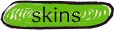
<style>
.page{position:relative;width:114px;height:30px}
.page>*{position:absolute;margin:0}
.t1{font:20px "Gotu-Regular";color:#000000}
</style>
<div class="page">
<p class="t1" style="left:32px;top:6px;width:49px;height:17px">skins</p>
</div>
